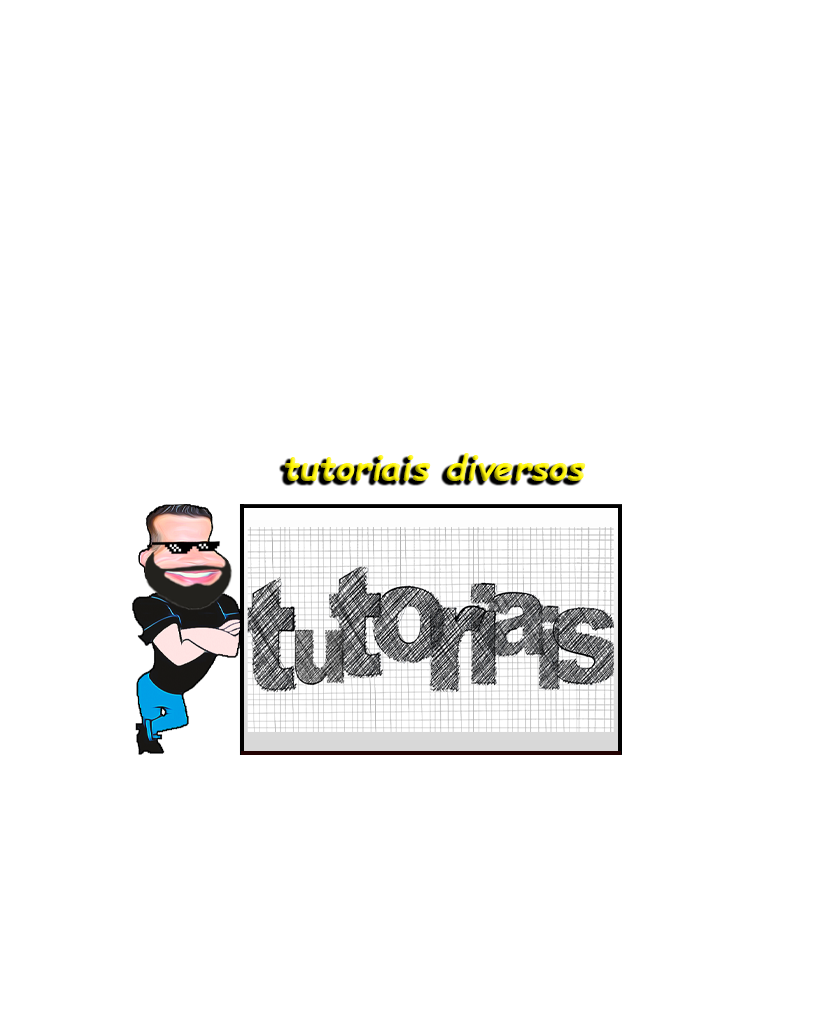
<style>
.page{position:relative;width:829px;height:1014px;background:#ffffff}
.page>*{position:absolute;margin:0}
.t1{font:36px "ComicSansMS-BoldItalic"}
</style>
<div class="page">
<p class="t1" style="left:284px;top:453px;width:302px;height:28px">tutoriais diversos</p>
</div>
